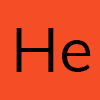
<style>
.page{position:relative;width:100px;height:100px;background:#f54e27}
.page>*{position:absolute;margin:0}
.t1{font:62.5px "Muli-Regular";color:#000000}
</style>
<div class="page">
<p class="t1" style="left:16px;top:28px;width:75px;height:44px">He</p>
</div>
